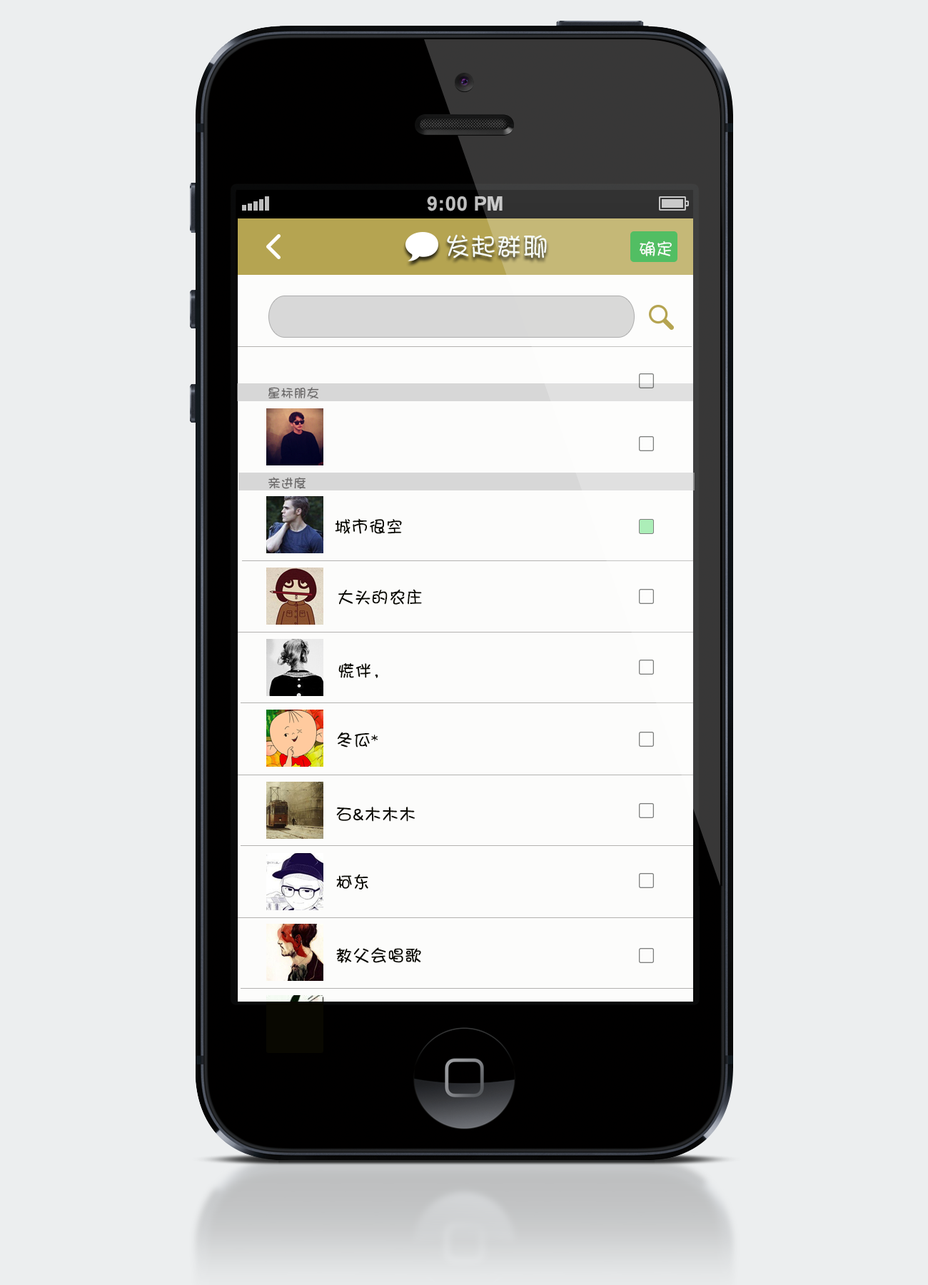
<style>
.page{position:relative;width:928px;height:1285px;background:#eceeef}
.page>*{position:absolute;margin:0}
.t1{font:25.7px "DFPShaoNvW5";letter-spacing:0.01em;color:#f5faf6}
.t2{font:23.6px "DFPShaoNvW5";letter-spacing:0.01em;color:#f5faf6}
.t3{font:17.1px "DFPShaoNvW5";letter-spacing:0.01em;color:#f9fdfa}
.t4{font:12.8px "DFPShaoNvW5";letter-spacing:0.01em;color:#676565}
.t5{font:17.1px "DFPShaoNvW5";letter-spacing:0.01em;color:#090801}
</style>
<div class="page">
<p class="t1" style="left:447px;top:234px;width:100px;height:24px"><span class="t2"> </span>发起群聊</p>
<p class="t3" style="left:640px;top:241px;width:32px;height:15px">确定</p>
<p class="t4" style="left:268px;top:387px;width:51px;height:12px">星标朋友</p>
<p class="t4" style="left:268px;top:477px;width:38px;height:12px">亲进度</p>
<p class="t5" style="left:335px;top:518px;width:67px;height:16px">城市很空</p>
<p class="t5" style="left:338px;top:589px;width:84px;height:16px">大头的农庄</p>
<p class="t5" style="left:338px;top:662px;width:40px;height:16px">慌伴，</p>
<p class="t5" style="left:337px;top:732px;width:41px;height:15px">冬瓜*</p>
<p class="t5" style="left:336px;top:807px;width:79px;height:15px">石&amp;木木木</p>
<p class="t5" style="left:336px;top:874px;width:32px;height:15px">柯东</p>
<p class="t5" style="left:336px;top:947px;width:85px;height:16px">教父会唱歌</p>
</div>
